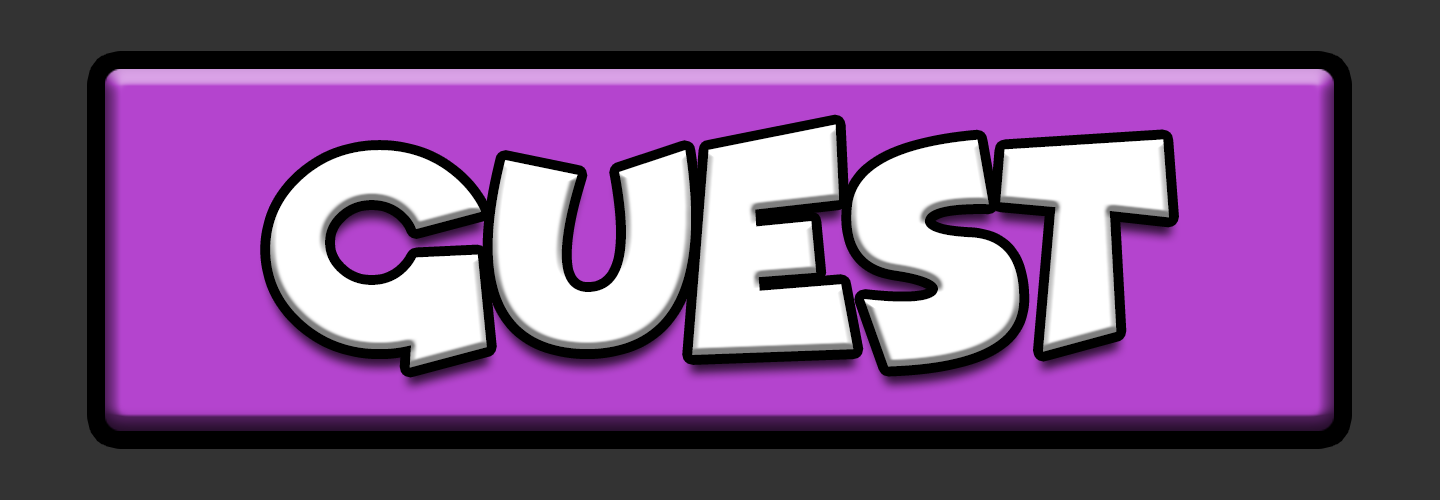
<style>
.page{position:relative;width:1440px;height:500px;background:#333333}
.page>*{position:absolute;margin:0}
.t1{font:290.6px "Funhouse";color:#ffffff;scale:0.95 1}
</style>
<div class="page">
<p class="t1" style="left:270px;top:124px;width:899px;height:244px">GUEST</p>
</div>
